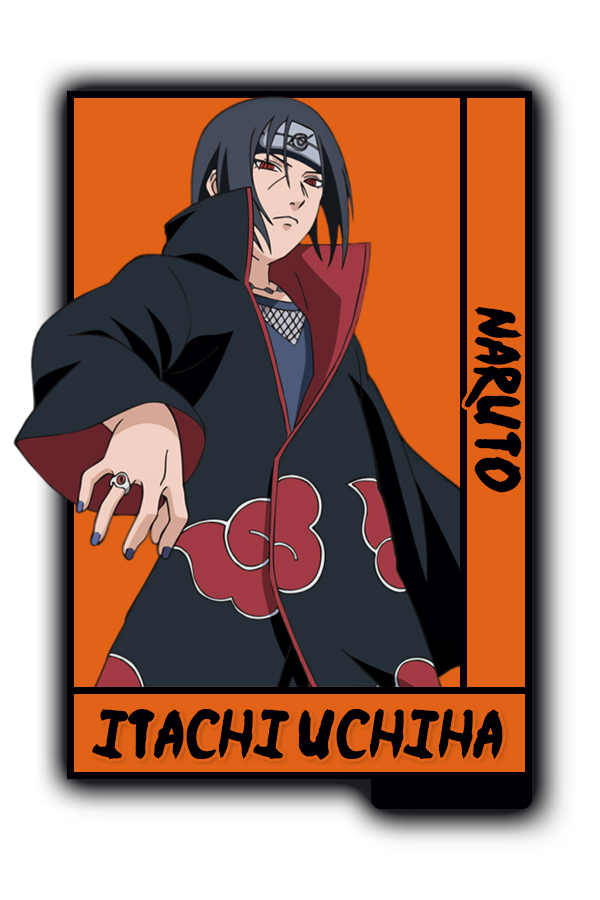
<style>
.page{position:relative;width:600px;height:900px;background:#ffffff}
.page>*{position:absolute;margin:0}
.t1{font:52px "Ninja-Naruto";color:#010005}
.t2{font:55.4px "Ninja-Naruto";color:#010005}
</style>
<div class="page">
<p class="t1" style="left:464px;top:307px;width:59px;height:186px;rotate:90deg">Naruto</p>
<p class="t2" style="left:92px;top:708px;width:411px;height:52px">Itachi Uchiha</p>
</div>
